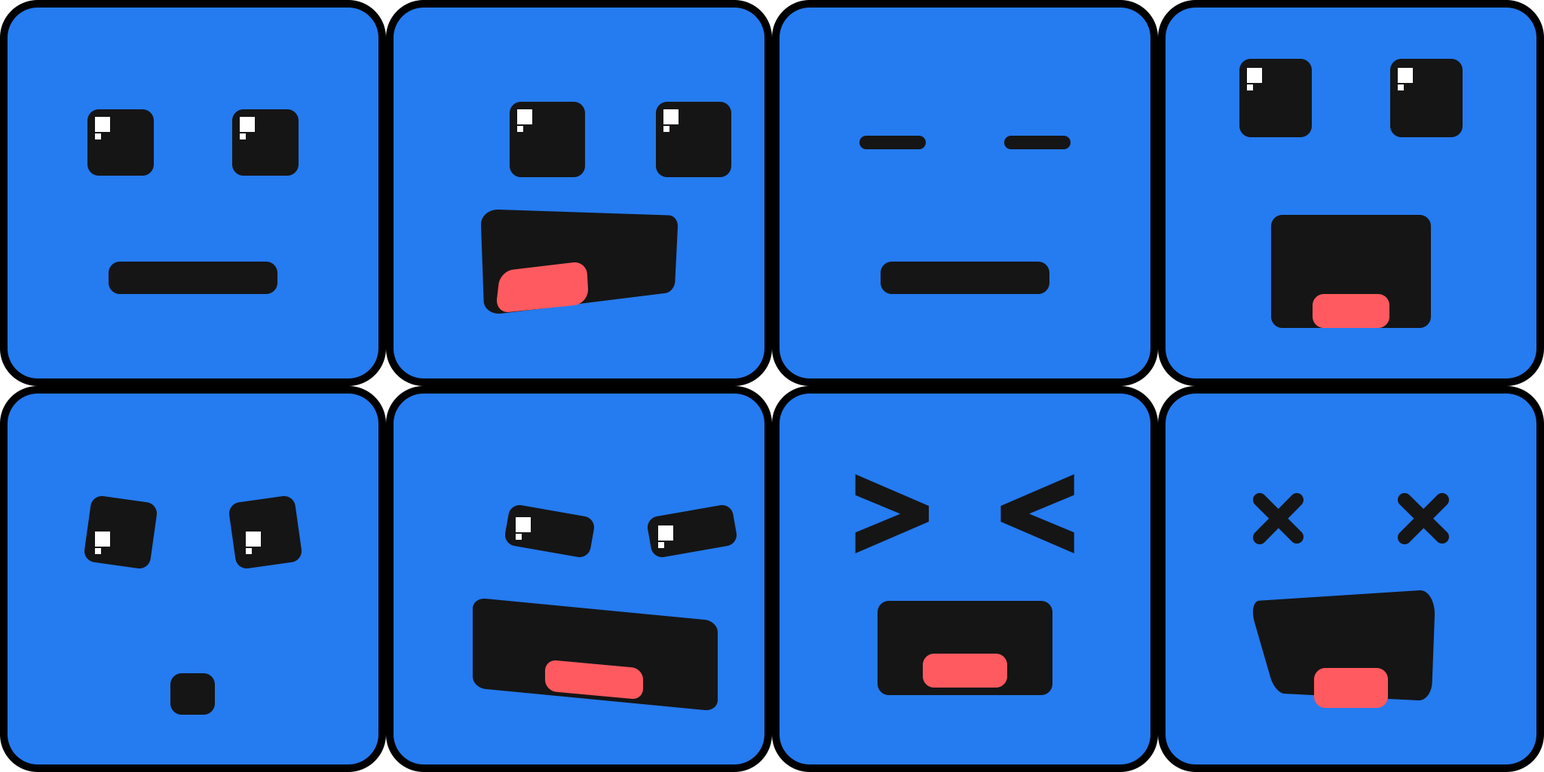
<style>
.page{position:relative;width:1544px;height:772px;background:#257bf0}
.page>*{position:absolute;margin:0}
.t1{font:162.3px "Impact";letter-spacing:0.3em;color:#151515;scale:0.96 1}
</style>
<div class="page">
<p class="t1" style="left:855px;top:474px;width:220px;height:79px">&gt;&lt;</p>
</div>
